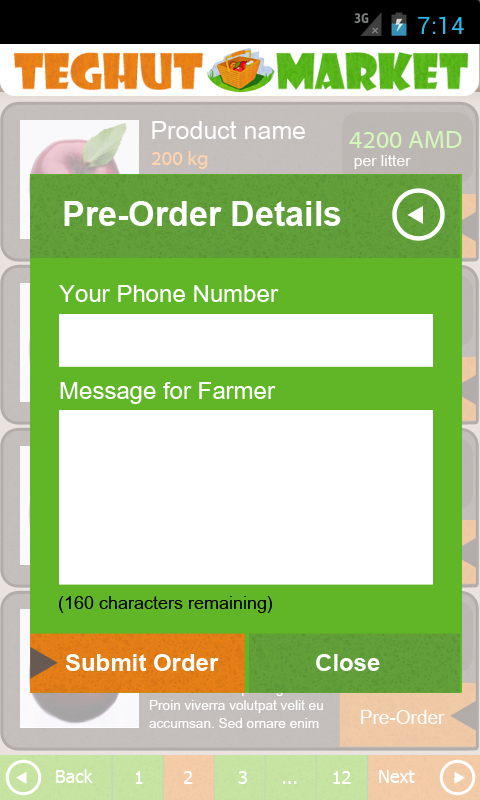
<style>
.page{position:relative;width:480px;height:800px;background:#ffffff}
.page>*{position:absolute;margin:0}
.t1{font:25px "ArialMT";color:#ffffff}
.t2{font:25.2px "MyriadWebPro";color:#d3f8ba}
.t3{font:20px "MyriadWebPro";color:#ffd3ab}
.t4{font:15.7px "ArialLatArm";color:#ffffff}
.t5{font:34px "Arial-BoldMT";color:#ffffff}
.t6{font:24px "ArialLatArm";color:#ffffff}
.t7{font:18px "ArialLatArm";color:#000000}
.t8{font:24px "Arial-BoldMT";color:#ffffff}
.t9{font:19px "ArialLatArm";color:#ffffff}
.t10{font:18px "Tahoma";color:#ffffff}
</style>
<div class="page">
<p class="t1" style="left:152px;top:121px;width:153px;height:18px">Product name</p>
<p class="t2" style="left:349px;top:131px;width:113px;height:17px">4200 AMD</p>
<p class="t3" style="left:151px;top:151px;width:57px;height:18px">200 kg</p>
<p class="t4" style="left:354px;top:155px;width:57px;height:14px">per litter</p>
<p class="t5" style="left:64px;top:201px;width:277px;height:25px">Pre-Order Details</p>
<p class="t6" style="left:59px;top:285px;width:220px;height:17px">Your Phone Number</p>
<p class="t6" style="left:60px;top:382px;width:216px;height:22px">Message for Farmer</p>
<p class="t7" style="left:59px;top:596px;width:213px;height:17px">(160 characters remaining)</p>
<p class="t8" style="left:65px;top:654px;width:154px;height:17px">Submit Order</p>
<p class="t8" style="left:316px;top:654px;width:64px;height:17px">Close</p>
<p class="t9" style="left:361px;top:710px;width:84px;height:14px">Pre-Order</p>
<p class="t10" style="left:56px;top:769px;width:37px;height:14px">Back</p>
<p class="t10" style="left:135px;top:771px;width:216px;height:13px">1       2        3      ...      12</p>
<p class="t10" style="left:379px;top:770px;width:36px;height:13px">Next</p>
</div>
